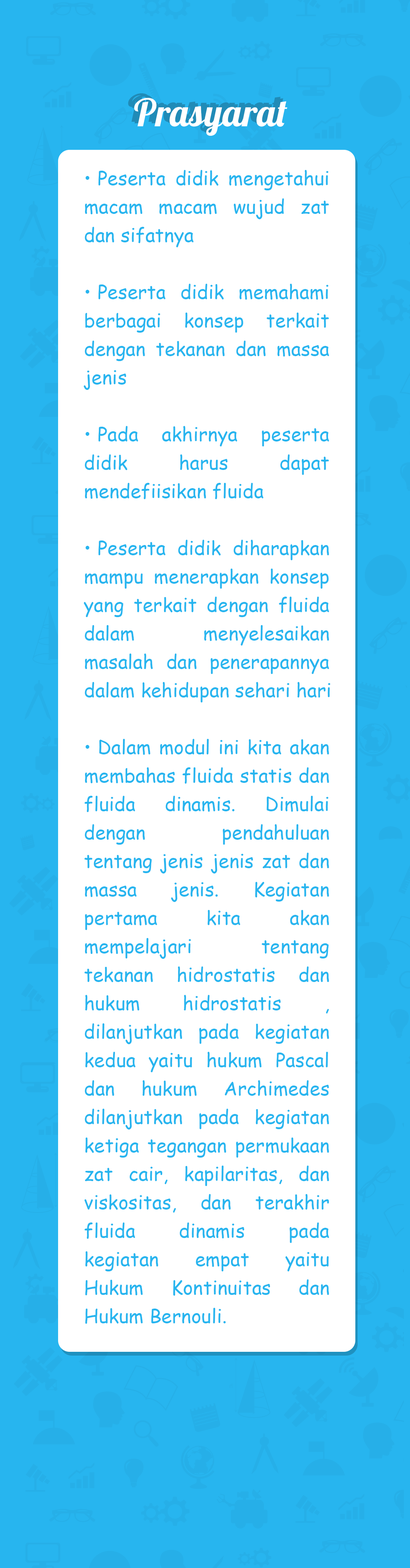
<style>
.page{position:relative;width:410px;height:1568px;background:#ffffff}
.page>*{position:absolute;margin:0}
.t1{font:37.9px "Lobster-Regular";color:#208bb7}
.t2{font:37.9px "Lobster-Regular"}
.t3{font:37.9px "Lobster-Regular";color:#ffffff}
.t4{font:19px/28.4px "ComicSansMS";letter-spacing:0.005em;color:#27b5ef}
</style>
<div class="page">
<p class="t1" style="left:128px;top:93px;width:153px;height:38px">Prasyarat</p>
<p class="t2" style="left:131px;top:95px;width:153px;height:38px">Prasyarat</p>
<p class="t3" style="left:134px;top:98px;width:153px;height:38px">Prasyarat</p>
<p class="t4" style="left:83px;top:170px;width:247px;height:1154px;text-align:justify">• Peserta didik mengetahui macam macam wujud zat dan sifatnya<br><br>• Peserta didik memahami berbagai konsep terkait dengan tekanan dan massa jenis<br><br>• Pada akhirnya peserta didik harus dapat mendefiisikan fluida<br><br>• Peserta didik diharapkan mampu menerapkan konsep yang terkait dengan fluida dalam menyelesaikan masalah dan penerapannya dalam kehidupan sehari hari<br> <br>• Dalam modul ini kita akan membahas fluida statis dan fluida dinamis. Dimulai dengan pendahuluan tentang jenis jenis zat dan massa jenis. Kegiatan pertama kita akan mempelajari tentang tekanan hidrostatis dan hukum hidrostatis , dilanjutkan pada kegiatan kedua yaitu hukum Pascal dan hukum Archimedes dilanjutkan pada kegiatan ketiga tegangan permukaan zat cair, kapilaritas, dan viskositas, dan terakhir fluida dinamis pada kegiatan empat yaitu Hukum Kontinuitas dan Hukum Bernouli.</p>
</div>
